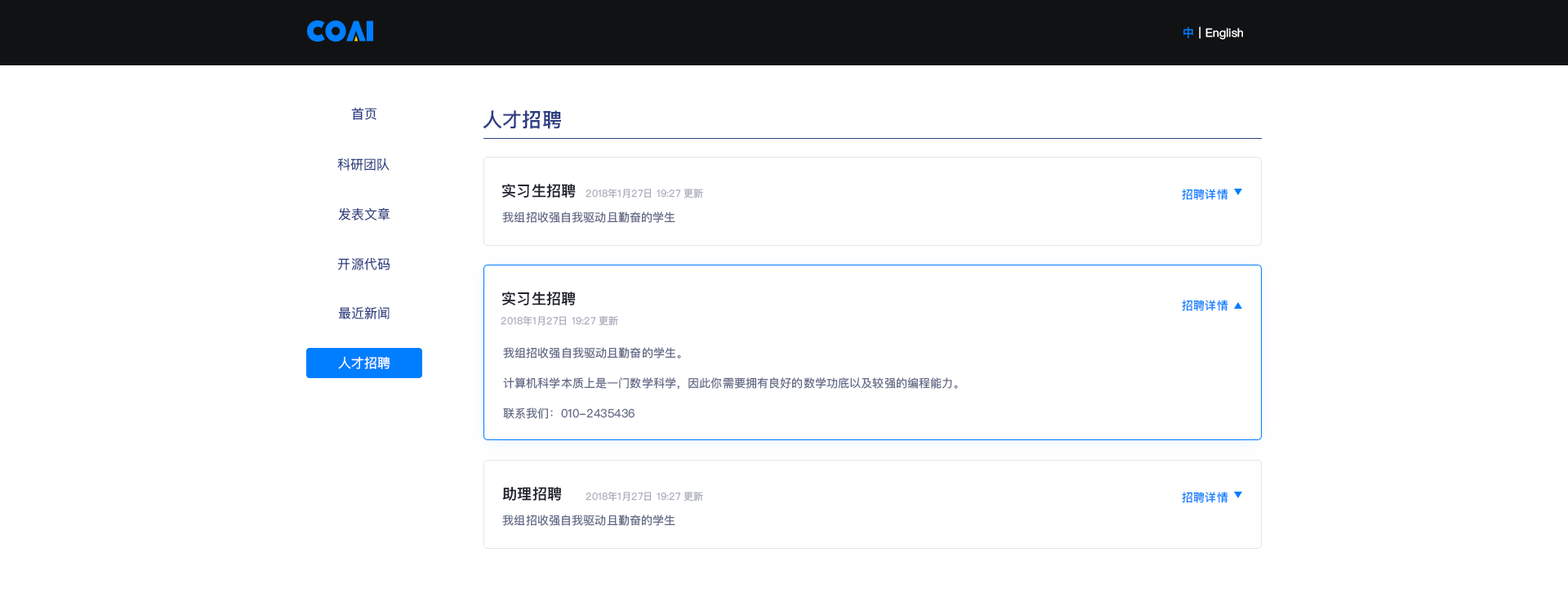
<style>
.page{position:relative;width:1568px;height:597px;background:#ffffff}
.page>*{position:absolute;margin:0}
.t1{font:11.4px "PingFangSC-Regular";letter-spacing:0.01em;color:#007eff}
.t2{font:11.4px "PingFangSC-Regular";letter-spacing:0.01em;color:#ffffff}
.t3{font:13.1px "PingFangSC-Regular";letter-spacing:0.01em;color:#2c3e81}
.t4{font:19.6px "PingFangSC-Semibold";letter-spacing:0.01em;color:#2c3e81}
.t5{font:14.7px "PingFangSC-Semibold";letter-spacing:0.01em;color:#1f232f}
.t6{font:9.8px "PingFangSC-Regular";letter-spacing:0.01em;color:#a9adbb}
.t7{font:11.4px "PingFangSC-Regular";letter-spacing:0.01em;color:#646b88}
.t8{font:11.4px/30.2px "PingFangSC-Regular";letter-spacing:0.01em;color:#646b88}
.t9{font:13.1px "PingFangSC-Regular";letter-spacing:0.01em;color:#ffffff}
</style>
<div class="page">
<p class="t1" style="left:1183px;top:27px;width:10px;height:11px">中</p>
<p class="t2" style="left:1199px;top:26px;width:44px;height:14px">| English</p>
<p class="t3" style="left:351px;top:107px;width:26px;height:13px">首页</p>
<p class="t4" style="left:483px;top:110px;width:78px;height:19px">人才招聘</p>
<p class="t3" style="left:337px;top:158px;width:53px;height:13px">科研团队</p>
<p class="t5" style="left:502px;top:184px;width:74px;height:14px">实习生招聘</p>
<p class="t6" style="left:586px;top:189px;width:117px;height:9px">2018年1月27日 19:27 更新</p>
<p class="t1" style="left:1182px;top:189px;width:46px;height:11px">招聘详情</p>
<p class="t3" style="left:338px;top:207px;width:52px;height:13px">发表文章</p>
<p class="t7" style="left:502px;top:212px;width:173px;height:11px">我组招收强自我驱动且勤奋的学生</p>
<p class="t3" style="left:337px;top:257px;width:53px;height:13px">开源代码</p>
<p class="t5" style="left:502px;top:292px;width:74px;height:13px">实习生招聘</p>
<p class="t1" style="left:1182px;top:300px;width:46px;height:11px">招聘详情</p>
<p class="t3" style="left:338px;top:306px;width:52px;height:13px">最近新闻</p>
<p class="t6" style="left:501px;top:316px;width:117px;height:10px">2018年1月27日 19:27 更新</p>
<p class="t8" style="left:503px;top:347px;width:455px;height:72px;text-align:right">我组招收强自我驱动且勤奋的学生。<br>计算机科学本质上是一门数学科学，因此你需要拥有良好的数学功底以及较强的编程能力。<br>联系我们：010-2435436</p>
<p class="t9" style="left:338px;top:356px;width:52px;height:13px">人才招聘</p>
<p class="t5" style="left:502px;top:487px;width:60px;height:14px">助理招聘</p>
<p class="t6" style="left:586px;top:492px;width:117px;height:9px">2018年1月27日 19:27 更新</p>
<p class="t1" style="left:1182px;top:492px;width:46px;height:11px">招聘详情</p>
<p class="t7" style="left:502px;top:514px;width:173px;height:12px">我组招收强自我驱动且勤奋的学生</p>
</div>
